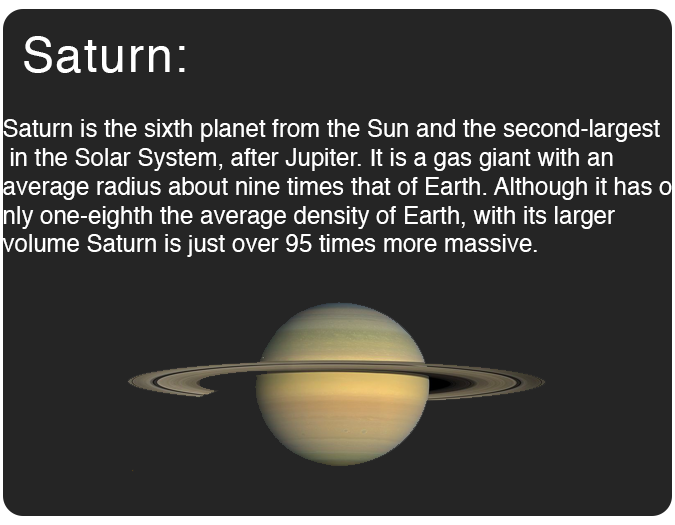
<style>
.page{position:relative;width:675px;height:525px;background:#252525}
.page>*{position:absolute;margin:0}
.t1{font:48px "Helvetica";letter-spacing:0.04em;color:#ffffff}
.t2{font:24px "Helvetica";color:#ffffff}
</style>
<div class="page">
<p class="t1" style="left:24px;top:36px;width:161px;height:37px">Saturn:</p>
<p class="t2" style="left:2px;top:119px;width:670px;height:138px">Saturn is the sixth planet from the Sun and the second-largest<br> in the Solar System, after Jupiter. It is a gas giant with an <br>average radius about nine times that of Earth. Although it has o<br>nly one-eighth the average density of Earth, with its larger <br>volume Saturn is just over 95 times more massive.</p>
</div>
